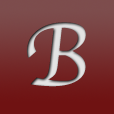
<style>
.page{position:relative;width:114px;height:114px}
.page>*{position:absolute;margin:0}
.t1{font:92px "Apple-Chancery";letter-spacing:-0.03em;font-weight:bold}
</style>
<div class="page">
<p class="t1" style="left:27px;top:22px;width:59px;height:65px">B</p>
</div>
